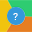
<style>
.page{position:relative;width:32px;height:32px;background:#f1c40f}
.page>*{position:absolute;margin:0}
.t1{font:9px "ArialMT";color:#ffffff}
</style>
<div class="page">
<p class="t1" style="left:13px;top:13px;width:5px;height:7px">?</p>
</div>
